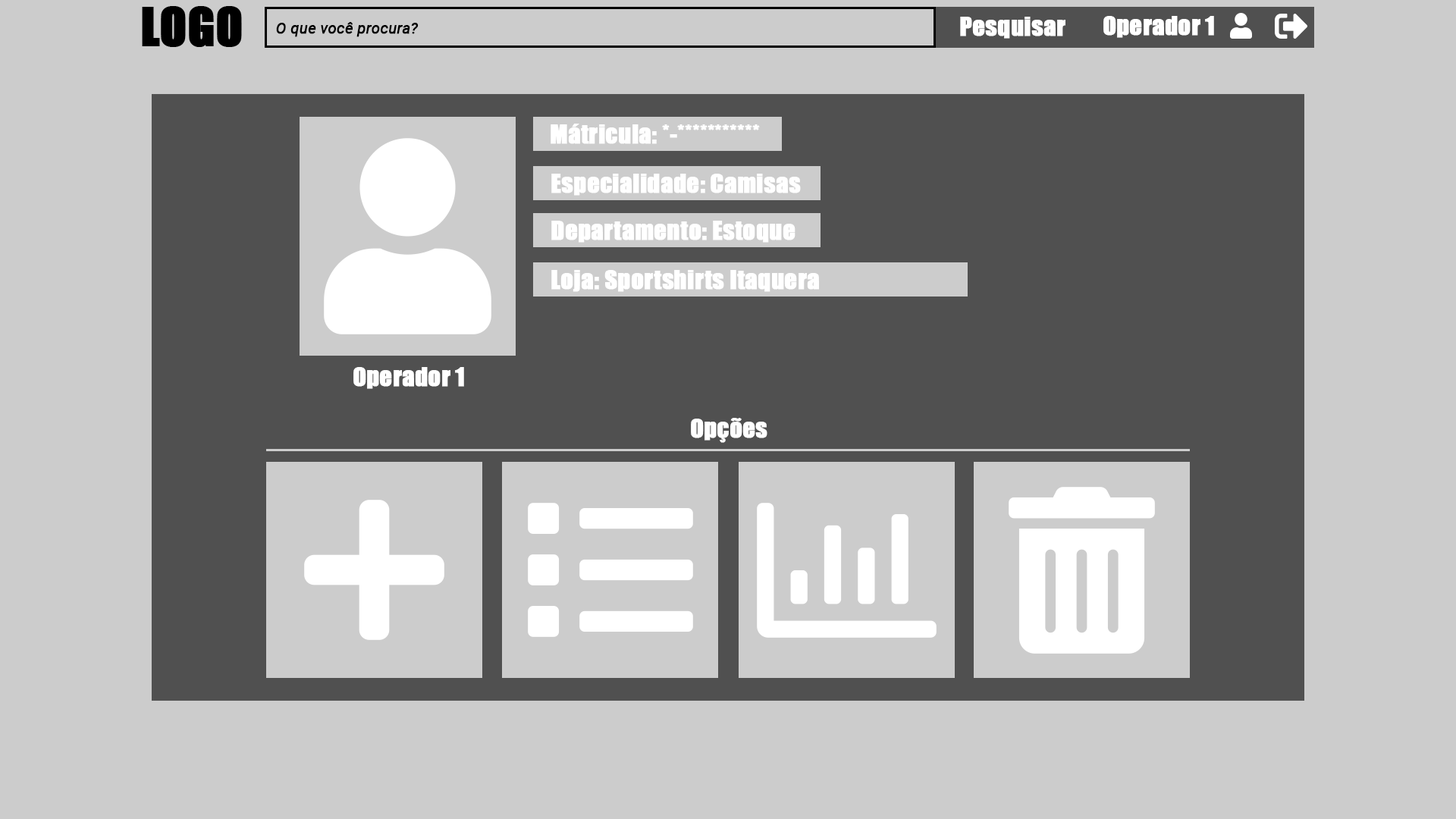
<style>
.page{position:relative;width:1456px;height:819px;background:#cccccc}
.page>*{position:absolute;margin:0}
.t1{font:24.3px "Impact";color:#ffffff;font-weight:bold}
.t2{font:15.2px "Roboto-Italic";color:#000000;font-weight:bold}
</style>
<div class="page">
<p class="t1" style="left:960px;top:17px;width:105px;height:22px">Pesquisar</p>
<p class="t1" style="left:1103px;top:16px;width:111px;height:22px">Operador 1</p>
<p class="t2" style="left:276px;top:22px;width:143px;height:15px">O que você procura?</p>
<p class="t1" style="left:551px;top:124px;width:209px;height:20px">Mátricula: *-***********</p>
<p class="t1" style="left:551px;top:174px;width:250px;height:22px">Especialidade: Camisas</p>
<p class="t1" style="left:551px;top:221px;width:244px;height:22px">Departamento: Estoque</p>
<p class="t1" style="left:551px;top:270px;width:268px;height:22px">Loja: Sportshirts Itaquera</p>
<p class="t1" style="left:353px;top:367px;width:111px;height:22px">Operador 1</p>
<p class="t1" style="left:691px;top:418px;width:76px;height:25px">Opções</p>
</div>
